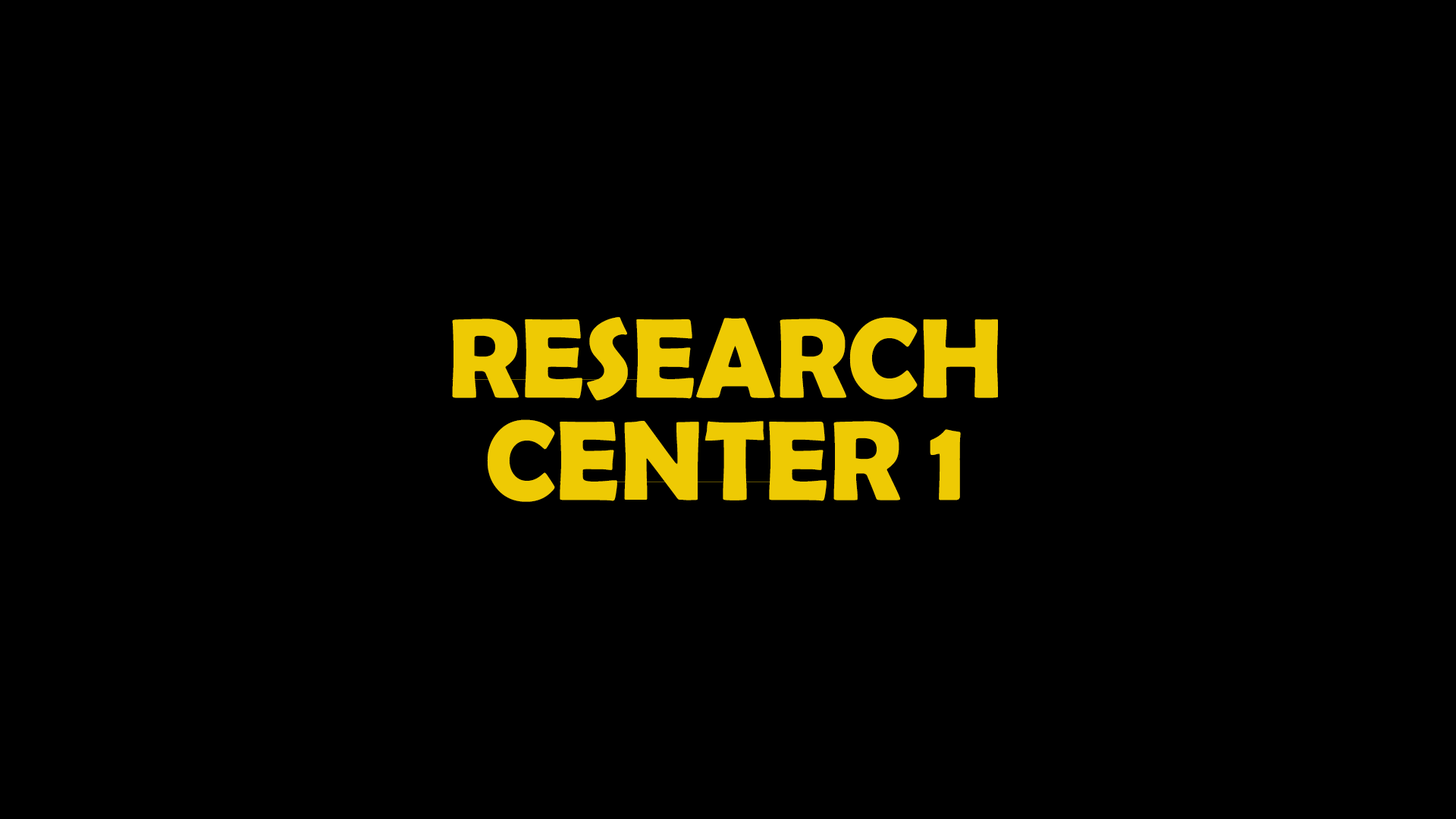
<style>
.page{position:relative;width:1456px;height:819px;background:#000000}
.page>*{position:absolute;margin:0}
.t1{font:113.7px/102.4px "BerlinSansFBDemi-Bold";color:#eeca04}
</style>
<div class="page">
<p class="t1" style="left:452px;top:317px;width:546px;height:185px;text-align:center">RESEARCH<br>CENTER 1</p>
</div>
